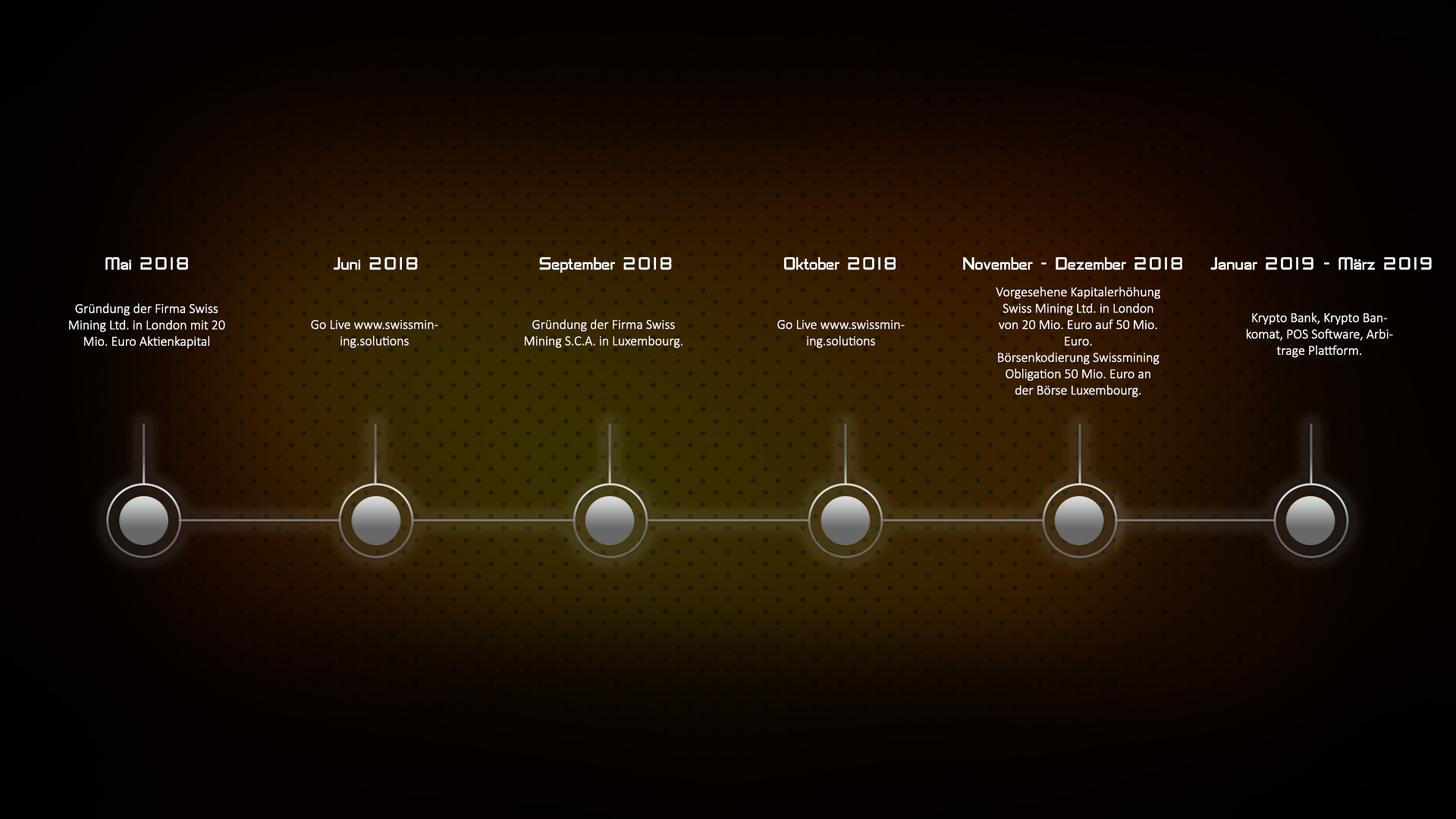
<style>
.page{position:relative;width:1456px;height:819px}
.page>*{position:absolute;margin:0}
.t1{font:18.2px "SFChaerilidae";color:#ffffff}
.t2{font:13.6px "Calibri-Light";color:#ffffff}
</style>
<div class="page">
<p class="t1" style="left:105px;top:257px;width:83px;height:13px">Mai 2018</p>
<p class="t1" style="left:334px;top:257px;width:84px;height:13px">Juni 2018</p>
<p class="t1" style="left:539px;top:257px;width:133px;height:16px">September 2018</p>
<p class="t1" style="left:784px;top:257px;width:112px;height:13px">Oktober 2018</p>
<p class="t1" style="left:963px;top:257px;width:219px;height:13px">November – Dezember 2018</p>
<p class="t1" style="left:1210px;top:257px;width:222px;height:13px">Januar 2019 – März 2019</p>
<p class="t2" style="left:996px;top:287px;width:164px;height:110px;text-align:center">Vorgesehene Kapitalerhöhung Swiss Mining Ltd. in London von 20 Mio. Euro auf 50 Mio. Euro.<br>Börsenkodierung Swissmining Obligation 50 Mio. Euro an der Börse Luxembourg.</p>
<p class="t2" style="left:69px;top:303px;width:156px;height:46px;text-align:center">Gründung der Firma Swiss Mining Ltd. in London mit 20 Mio. Euro Aktienkapital</p>
<p class="t2" style="left:1247px;top:312px;width:146px;height:46px;text-align:center">Krypto Bank, Krypto Bankomat, POS Software, Arbitrage Plattform.</p>
<p class="t2" style="left:311px;top:320px;width:127px;height:28px;text-align:center">Go Live www.swissmining.solutions</p>
<p class="t2" style="left:525px;top:319px;width:157px;height:29px;text-align:center">Gründung der Firma Swiss Mining S.C.A. in Luxembourg.</p>
<p class="t2" style="left:777px;top:320px;width:128px;height:28px;text-align:center">Go Live www.swissmining.solutions</p>
</div>
